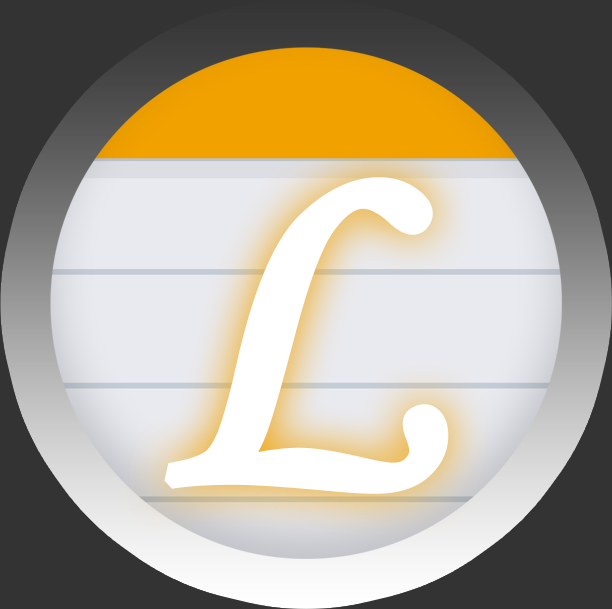
<style>
.page{position:relative;width:612px;height:609px;background:#333333}
.page>*{position:absolute;margin:0}
.t1{font:500px "STLiti";color:#ffffff;font-weight:bold}
</style>
<div class="page">
<p class="t1" style="left:164px;top:177px;width:285px;height:317px">L</p>
</div>
